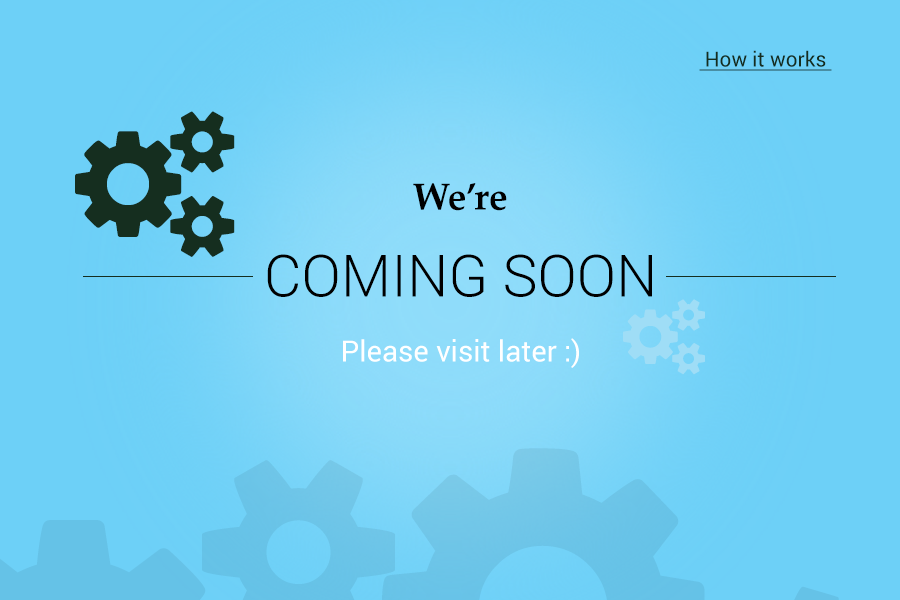
<style>
.page{position:relative;width:900px;height:600px;background:#6dd0f7}
.page>*{position:absolute;margin:0}
.t1{font:20.8px "Roboto-Regular";color:#152e1f;text-decoration:underline}
.t2{font:37.5px "PalatinoLinotype-Bold";color:#000000}
.t3{font:58.3px "Roboto-Light";color:#000000}
.t4{font:29.2px "Roboto-Regular";color:#ffffff}
</style>
<div class="page">
<p class="t1" style="left:699px;top:50px;width:133px;height:21px">How it works</p>
<p class="t2" style="left:413px;top:183px;width:94px;height:28px">We’re</p>
<p class="t3" style="left:267px;top:254px;width:385px;height:43px">COMING SOON</p>
<p class="t4" style="left:343px;top:338px;width:236px;height:30px">Please visit later :)</p>
</div>
